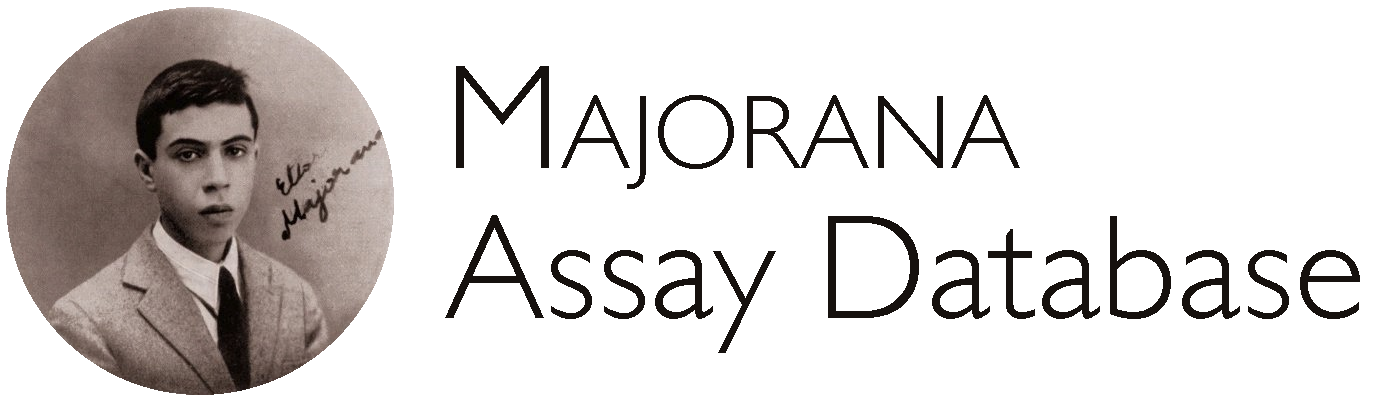
<style>
.page{position:relative;width:1386px;height:399px;background:#ffffff}
.page>*{position:absolute;margin:0}
.t1{font:150px/150px "GillSans-Light";color:#16110e}
.t2{font:150px/150px "GillSans-Light";color:#16110e;font-variant:small-caps}
</style>
<div class="page">
<p class="t1" style="left:445px;top:66px;width:915px;height:287px">M<span class="t2">ajorana<br></span>Assay Database</p>
</div>
